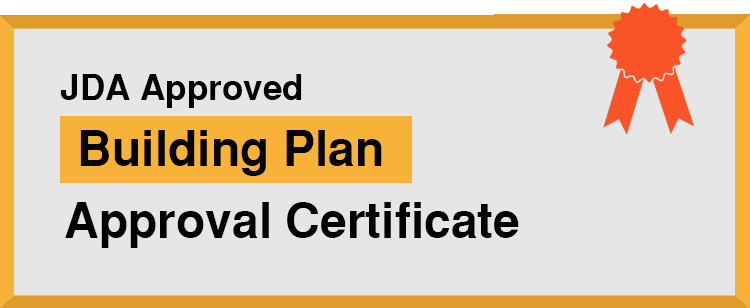
<style>
.page{position:relative;width:750px;height:308px;background:#e6e6e6}
.page>*{position:absolute;margin:0}
.t1{font:35.1px "SansSerifBold";color:#040202}
.t2{font:48px/72px "SansSerifBold";color:#040202}
</style>
<div class="page">
<p class="t1" style="left:60px;top:74px;width:242px;height:34px">JDA Approved</p>
<p class="t2" style="left:65px;top:130px;width:454px;height:118px">Building Plan <br>Approval Certificate</p>
</div>
